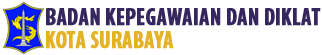
<style>
.page{position:relative;width:322px;height:55px;background:#ffffff}
.page>*{position:absolute;margin:0}
.t1{font:24px/23px "MyriadPro-BoldCond";color:#35265e;font-weight:bold;scale:0.92 1}
.t2{font:24px/23px "MyriadPro-BoldCond";color:#e5b224;font-weight:bold;scale:0.92 1}
</style>
<div class="page">
<p class="t1" style="left:46px;top:8px;width:275px;height:41px">BADAN KEPEGAWAIAN DAN DIKLAT<br><span class="t2">KOTA SURABAYA</span></p>
</div>
